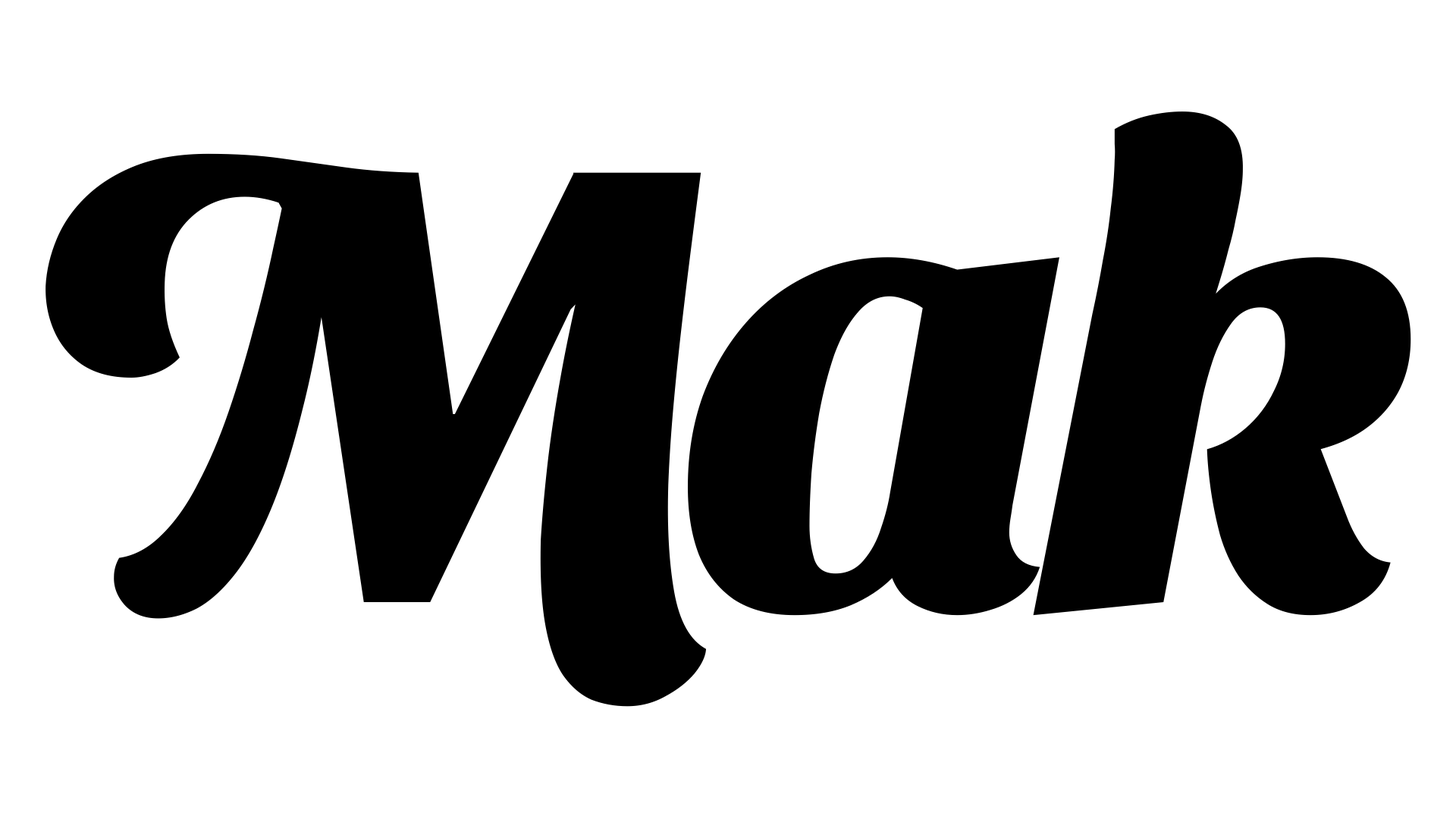
<style>
.page{position:relative;width:1456px;height:819px;background:#ffffff}
.page>*{position:absolute;margin:0}
.t1{font:650.6px "SansitaSwashed-ExtraBold";letter-spacing:-0.042em;color:#000000}
</style>
<div class="page">
<p class="t1" style="left:45px;top:111px;width:1366px;height:596px">Mak</p>
</div>
